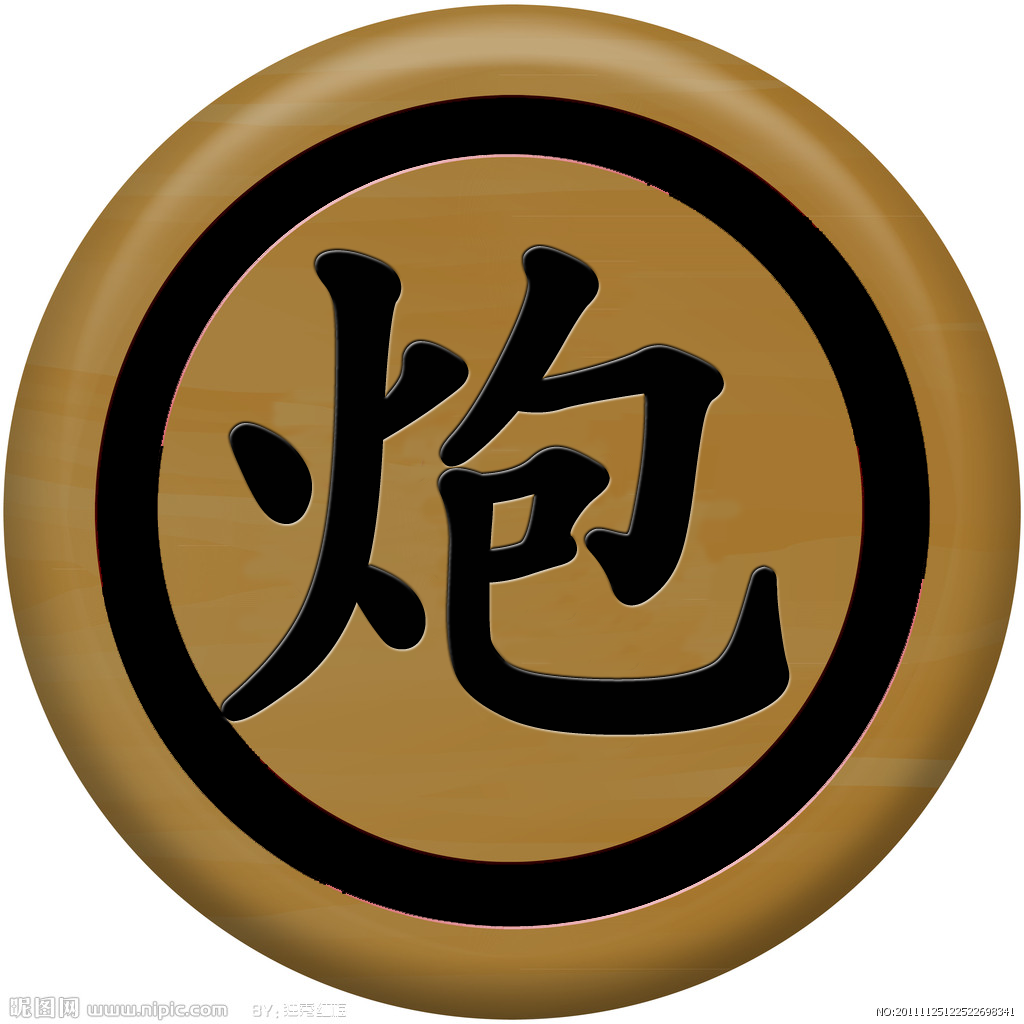
<style>
.page{position:relative;width:1024px;height:1024px;background:#ffffff}
.page>*{position:absolute;margin:0}
.t1{font:593.5px "STKaiti";color:#010101;font-weight:bold;scale:1.08 1}
</style>
<div class="page">
<p class="t1" style="left:221px;top:246px;width:569px;height:489px">炮</p>
</div>
